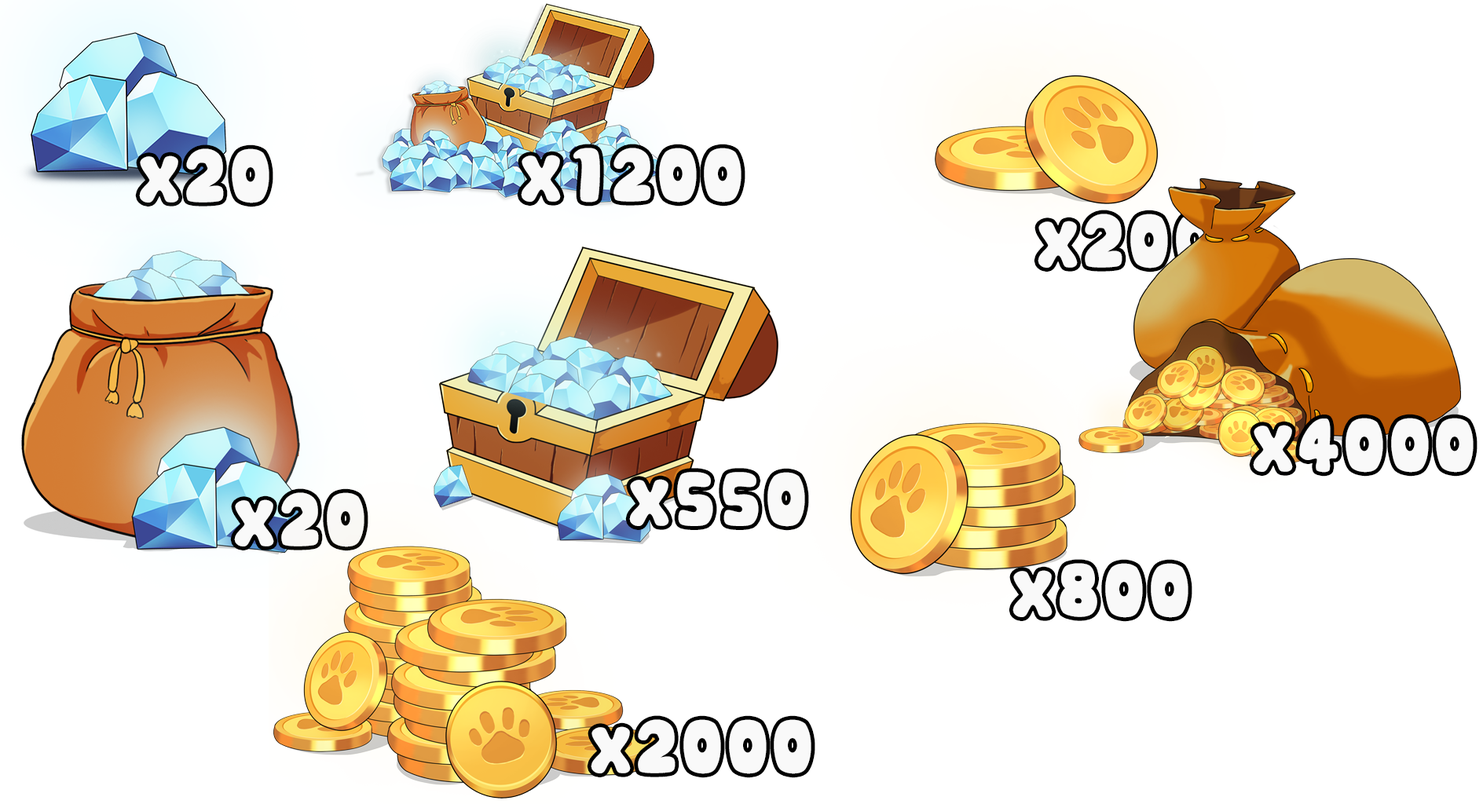
<style>
.page{position:relative;width:1483px;height:804px;background:#ffffff}
.page>*{position:absolute;margin:0}
.t1{font:74.4px "UTM-Cookies";color:#f9f9f9}
</style>
<div class="page">
<p class="t1" style="left:139px;top:148px;width:130px;height:55px">x20</p>
<p class="t1" style="left:521px;top:148px;width:220px;height:55px">x1200</p>
<p class="t1" style="left:1037px;top:214px;width:176px;height:55px">x200</p>
<p class="t1" style="left:1253px;top:418px;width:220px;height:55px">x4000</p>
<p class="t1" style="left:629px;top:472px;width:176px;height:55px">x550</p>
<p class="t1" style="left:234px;top:492px;width:130px;height:55px">x20</p>
<p class="t1" style="left:1012px;top:563px;width:176px;height:55px">x800</p>
<p class="t1" style="left:591px;top:719px;width:220px;height:55px">x2000</p>
</div>
